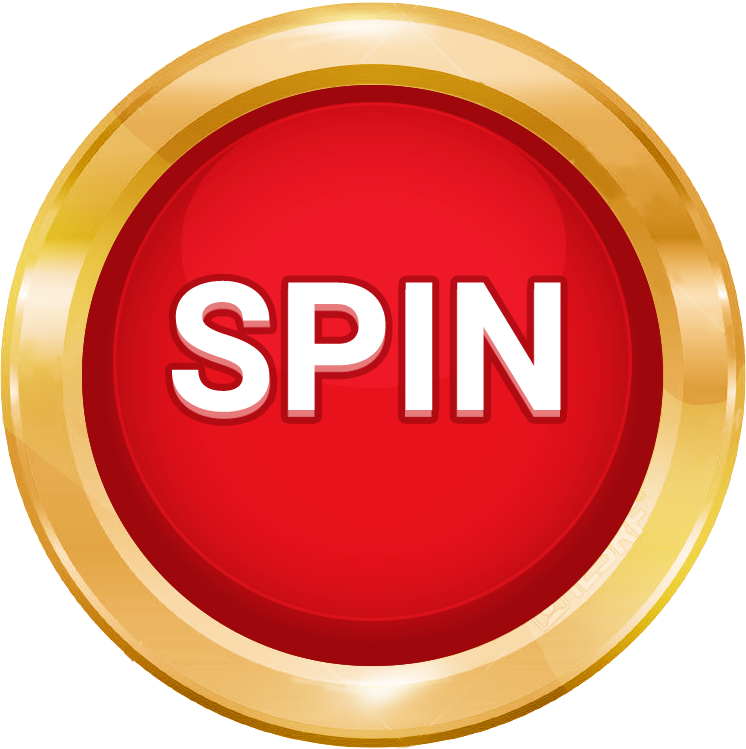
<style>
.page{position:relative;width:746px;height:749px;background:#ffffff}
.page>*{position:absolute;margin:0}
.t1{font:179px "Roboto-Bold";letter-spacing:0.005em;color:#ffffff}
</style>
<div class="page">
<p class="t1" style="left:172px;top:280px;width:389px;height:132px">SPIN</p>
</div>
